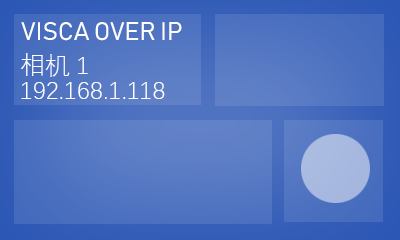
<style>
.page{position:relative;width:400px;height:240px}
.page>*{position:absolute;margin:0}
.t1{font:25px "Bahnschrift-SemiLight";color:#ffffff}
.t2{font:25px/25px "DengXian-Light";color:#ffffff}
</style>
<div class="page">
<p class="t1" style="left:21px;top:22px;width:161px;height:19px">VISCA OVER IP</p>
<p class="t2" style="left:20px;top:53px;width:145px;height:46px">相机1 <br>192.168.1.118</p>
</div>
